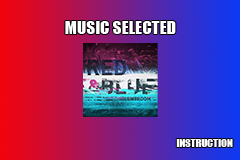
<style>
.page{position:relative;width:240px;height:160px}
.page>*{position:absolute;margin:0}
.t1{font:16px "Impact";color:#ffffff;text-transform:uppercase;scale:1.07 1}
.t2{font:10px "Impact";color:#ffffff;text-transform:uppercase;scale:1.07 1}
</style>
<div class="page">
<p class="t1" style="left:65px;top:21px;width:111px;height:13px">MUSIC SELECTED</p>
<p class="t2" style="left:176px;top:139px;width:57px;height:8px">Instruction</p>
</div>
